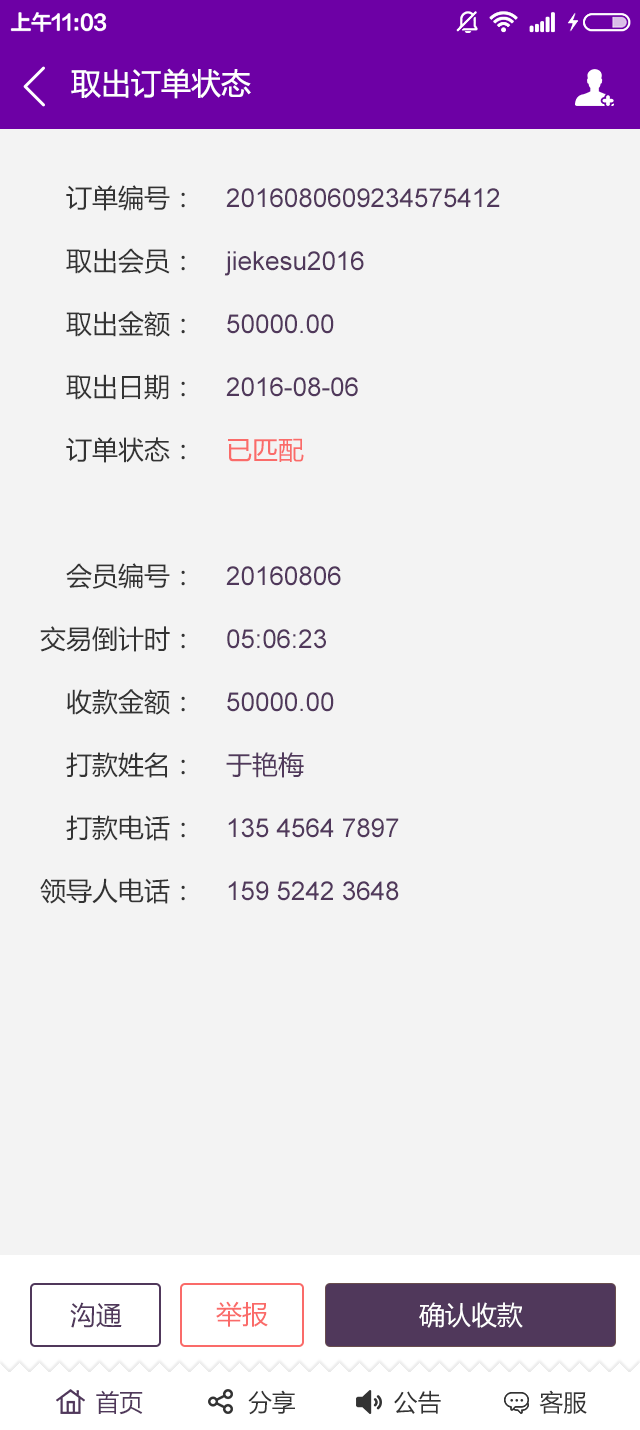
<style>
.page{position:relative;width:640px;height:1430px;background:#f3f3f3}
.page>*{position:absolute;margin:0}
.t1{font:30px "MicrosoftYaHei";color:#ffffff}
.t2{font:26px/63px "MicrosoftYaHei";color:#333333}
.t3{font:26px/63px "ArialMT";color:#50385b}
.t4{font:26px/63px "MicrosoftYaHei";color:#fa6b69}
.t5{font:26px/63px "MicrosoftYaHei";color:#50385b}
.t6{font:26px "MicrosoftYaHei";color:#50385b}
.t7{font:26px "MicrosoftYaHei";color:#fa6b69}
.t8{font:26px "MicrosoftYaHei";color:#ffffff}
.t9{font:24px "MicrosoftYaHei";color:#333333}
.t10{font:24px "MicrosoftYaHei";color:#50385b}
</style>
<div class="page">
<p class="t1" style="left:71px;top:68px;width:180px;height:31px">取出订单状态</p>
<p class="t2" style="left:40px;top:185px;width:145px;height:719px;text-align:right">订单编号：<br>取出会员：<br>取出金额：<br>取出日期：<br>订单状态：<br><br>会员编号：<br>交易倒计时：<br>收款金额：<br>打款姓名：<br>打款电话：<br>领导人电话：</p>
<p class="t3" style="left:224px;top:188px;width:276px;height:713px">2016080609234575412<br>jiekesu2016<br>50000.00<br>2016-08-06<br><span class="t4">已匹配<br><br></span>20160806<br>05:06:23<br>50000.00<br><span class="t5">于艳梅<br></span>135 4564 7897<br>159 5242 3648</p>
<p class="t6" style="left:70px;top:1302px;width:52px;height:26px">沟通</p>
<p class="t7" style="left:216px;top:1301px;width:52px;height:26px">举报</p>
<p class="t8" style="left:419px;top:1302px;width:104px;height:26px">确认收款</p>
<p class="t9" style="left:96px;top:1390px;width:491px;height:25px"><span class="t10">首页</span>               分享              公告              客服</p>
</div>
